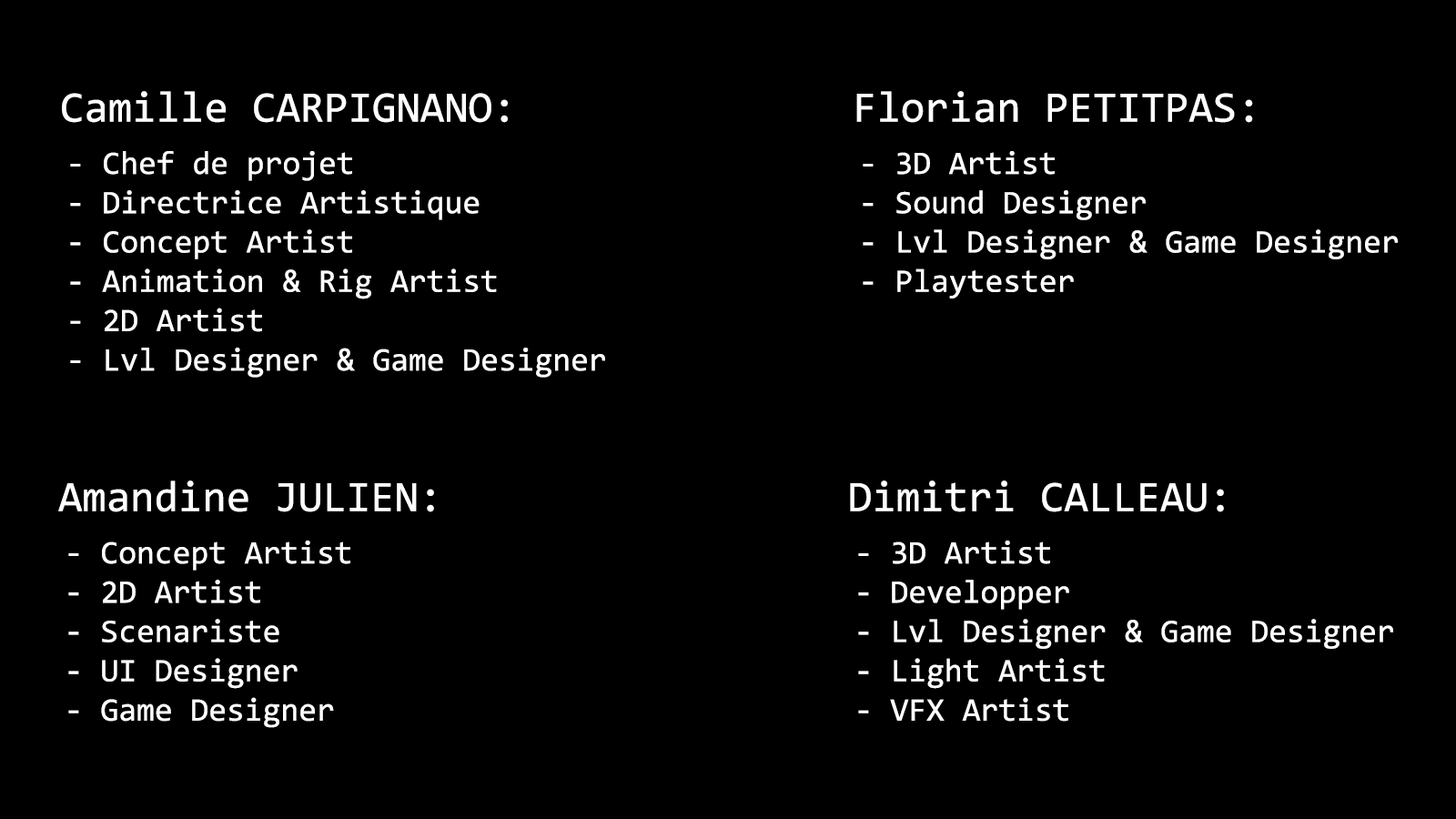
<style>
.page{position:relative;width:1456px;height:819px;background:#000000}
.page>*{position:absolute;margin:0}
.t1{font:43.7px "Consolas";color:#ffffff}
.t2{font:32.8px "Consolas";color:#ffffff}
</style>
<div class="page">
<p class="t1" style="left:62px;top:91px;width:446px;height:32px">Camille CARPIGNANO:</p>
<p class="t1" style="left:856px;top:91px;width:397px;height:32px">Florian PETITPAS:</p>
<p class="t2" style="left:70px;top:151px;width:535px;height:227px">- Chef de projet<br>- Directrice Artistique<br>- Concept Artist<br>- Animation &amp; Rig Artist<br>- 2D Artist<br>- Lvl Designer &amp; Game Designer</p>
<p class="t2" style="left:863px;top:151px;width:535px;height:147px">- 3D Artist<br>- Sound Designer<br>- Lvl Designer &amp; Game Designer<br>- Playtester</p>
<p class="t1" style="left:58px;top:480px;width:376px;height:32px">Amandine JULIEN:</p>
<p class="t1" style="left:850px;top:480px;width:374px;height:32px">Dimitri CALLEAU:</p>
<p class="t2" style="left:68px;top:541px;width:282px;height:187px">- Concept Artist<br>- 2D Artist<br>- Scenariste<br>- UI Designer<br>- Game Designer</p>
<p class="t2" style="left:858px;top:541px;width:535px;height:181px">- 3D Artist<br>- Developper<br>- Lvl Designer &amp; Game Designer<br>- Light Artist<br>- VFX Artist</p>
</div>
